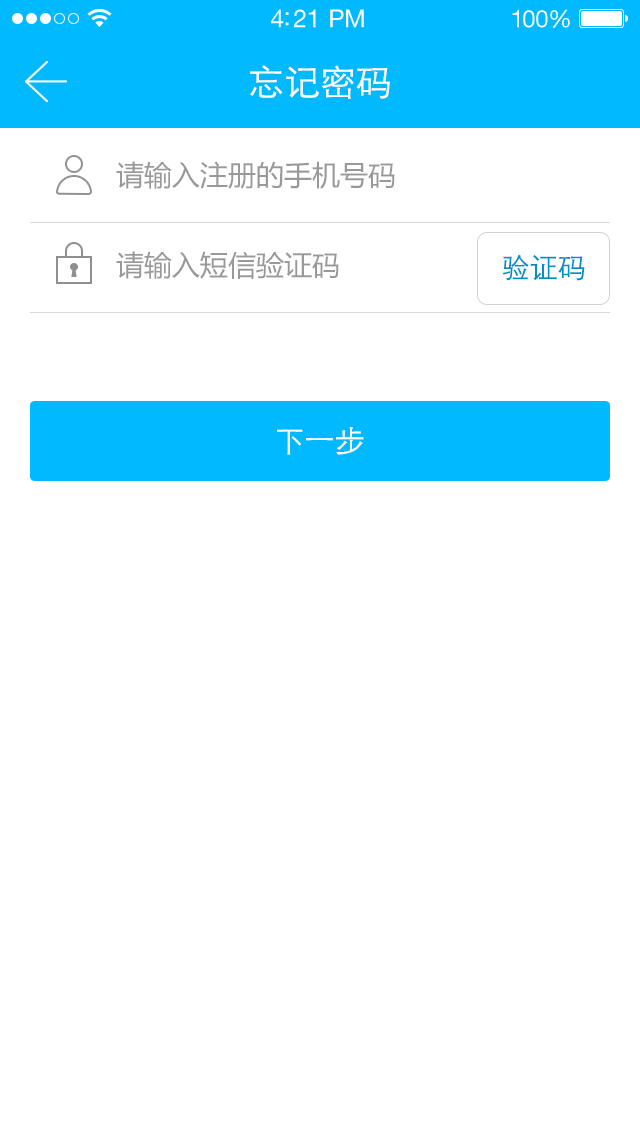
<style>
.page{position:relative;width:640px;height:1136px;background:#ffffff}
.page>*{position:absolute;margin:0}
.t1{font:25px "HelveticaNeueLTStd-Roman";letter-spacing:-0.02em;color:#ffffff}
.t2{font:24px "HelveticaNeueLTStd-Roman";letter-spacing:-0.02em;color:#ffffff}
.t3{font:36px "STXihei";color:#ffffff;text-transform:uppercase}
.t4{font:28px "MicrosoftYaHei";color:#999999}
.t5{font:28px "STXihei";color:#028fc4;text-transform:uppercase}
.t6{font:30px "STXihei";color:#ffffff}
</style>
<div class="page">
<p class="t1" style="left:271px;top:9px;width:93px;height:19px">4:21 PM</p>
<p class="t2" style="left:512px;top:9px;width:58px;height:19px">100%</p>
<p class="t3" style="left:250px;top:65px;width:140px;height:34px">忘记密码</p>
<p class="t4" style="left:116px;top:161px;width:279px;height:28px">请输入注册的手机号码</p>
<p class="t4" style="left:116px;top:251px;width:223px;height:28px">请输入短信验证码</p>
<p class="t5" style="left:502px;top:254px;width:83px;height:27px">验证码</p>
<p class="t6" style="left:277px;top:427px;width:87px;height:28px">下一步</p>
</div>
